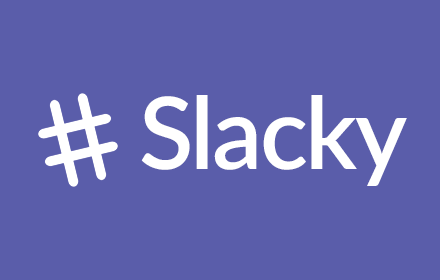
<style>
.page{position:relative;width:440px;height:280px;background:#5a5daa}
.page>*{position:absolute;margin:0}
.t1{font:100px "Lato-Semibold";letter-spacing:-0.025em;color:#ffffff}
</style>
<div class="page">
<p class="t1" style="left:141px;top:95px;width:266px;height:91px">Slacky</p>
</div>
